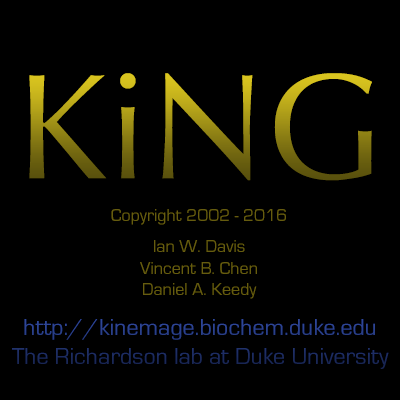
<style>
.page{position:relative;width:400px;height:400px;background:#000000}
.page>*{position:absolute;margin:0}
.t1{font:150px "Optima-Regular"}
.t2{font:18px "EurostileRegular";color:#665c0f}
.t3{font:24px "EurostileRegular"}
</style>
<div class="page">
<p class="t1" style="left:29px;top:73px;width:343px;height:108px">KiNG</p>
<p class="t2" style="left:111px;top:209px;width:175px;height:90px;text-align:center">Copyright 2002 - 2016<br><br>Ian W. Davis<br>Vincent B. Chen<br>Daniel A. Keedy</p>
<p class="t3" style="left:12px;top:319px;width:377px;height:50px;text-align:center">http://kinemage.biochem.duke.edu<br>The Richardson lab at Duke University</p>
</div>
